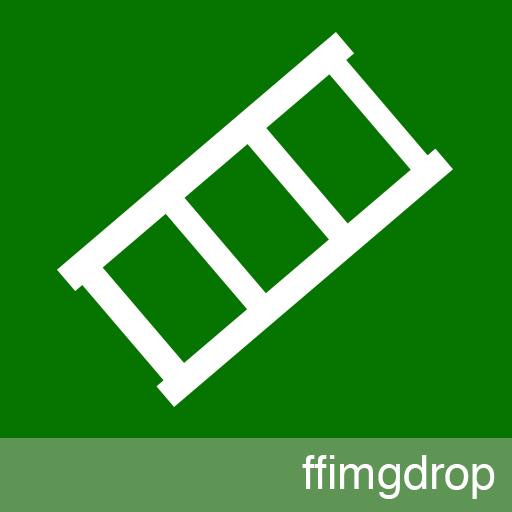
<style>
.page{position:relative;width:512px;height:512px;background:#067500}
.page>*{position:absolute;margin:0}
.t1{font:46.9px "Helvetica";color:#ffffff}
</style>
<div class="page">
<p class="t1" style="left:302px;top:455px;width:193px;height:44px">ffimgdrop</p>
</div>
